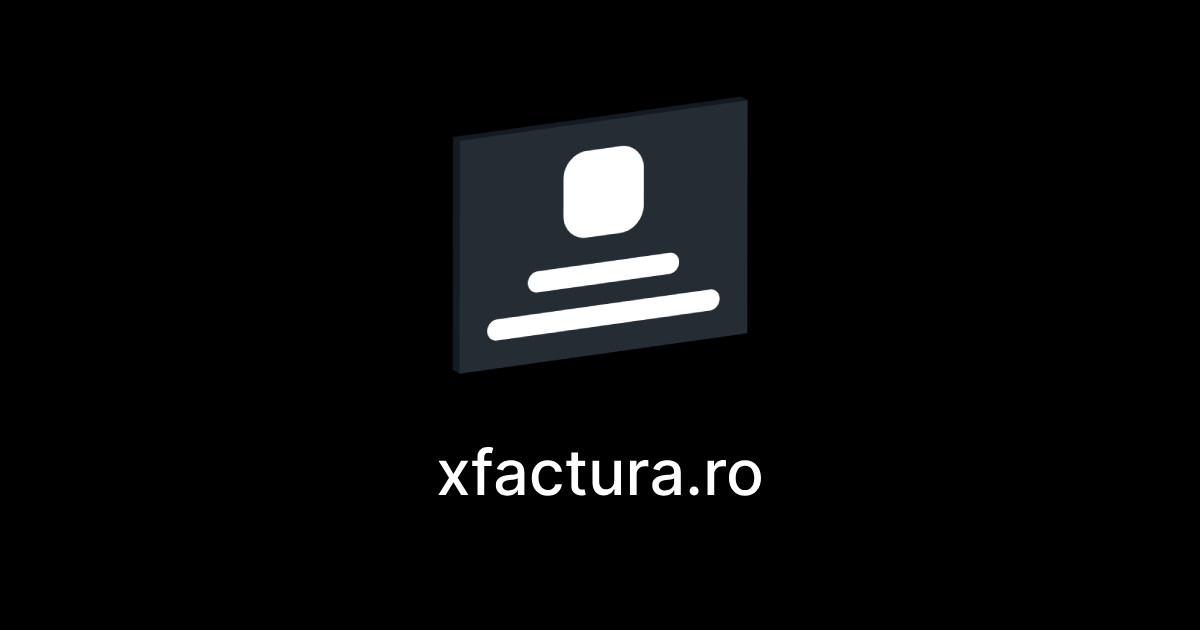
<style>
.page{position:relative;width:1200px;height:630px;background:#000000}
.page>*{position:absolute;margin:0}
.t1{font:63px "Inter-Medium";color:#ffffff}
</style>
<div class="page">
<p class="t1" style="left:438px;top:447px;width:323px;height:49px">xfactura.ro</p>
</div>
